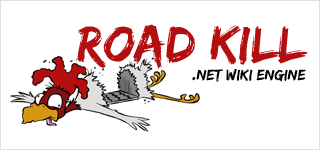
<style>
.page{position:relative;width:320px;height:150px;background:#ffffff}
.page>*{position:absolute;margin:0}
.t1{font:52.8px "EdoSZ";color:#b30f10}
.t2{font:15.8px "EdoSZ";color:#000000}
</style>
<div class="page">
<p class="t1" style="left:77px;top:24px;width:231px;height:45px">ROAD KILL</p>
<p class="t2" style="left:192px;top:69px;width:114px;height:13px">.NET WIKI ENGINE</p>
</div>
